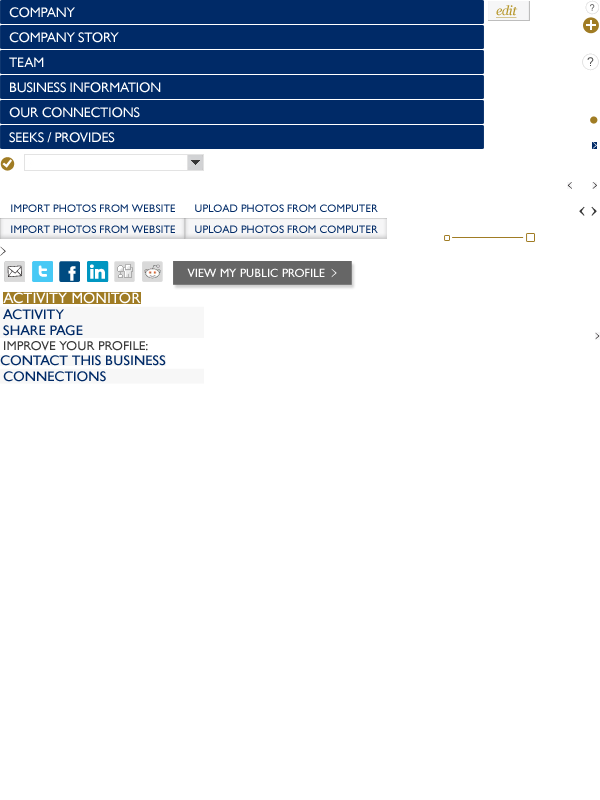
<style>
.page{position:relative;width:600px;height:800px;background:#ffffff}
.page>*{position:absolute;margin:0}
.t1{font:13px "Georgia-Italic";letter-spacing:-0.025em;color:#b59527;text-decoration:underline}
.t2{font:14px "GillSans";letter-spacing:-0.025em;color:#ffffff;text-transform:uppercase}
.t3{font:22.1px "Georgia";letter-spacing:-0.01em;color:#363636}
.t4{font:14px "GillSans";color:#002a67;text-transform:uppercase}
.t5{font:13px "GillSans";color:#3b3b3b;text-transform:uppercase}
</style>
<div class="page">
<p class="t1" style="left:496px;top:5px;width:22px;height:13px">edit</p>
<p class="t2" style="left:9px;top:7px;width:66px;height:11px">COMPANY</p>
<p class="t2" style="left:9px;top:32px;width:110px;height:11px">COMPANY story</p>
<p class="t2" style="left:9px;top:57px;width:35px;height:10px">TEAM</p>
<p class="t2" style="left:10px;top:82px;width:151px;height:11px">BUSINESS INFORMATION</p>
<p class="t2" style="left:9px;top:107px;width:131px;height:11px">OUR CONNECTIONS</p>
<p class="t2" style="left:9px;top:132px;width:106px;height:11px">SEEKS / PROVIDES</p>
<p class="t3" style="left:579px;top:206px;width:6px;height:10px;rotate:180deg">›</p>
<p class="t3" style="left:591px;top:206px;width:6px;height:10px">›</p>
<p class="t4" style="left:3px;top:309px;width:61px;height:11px">ACTIVITY</p>
<p class="t4" style="left:3px;top:325px;width:80px;height:11px">SHARE page</p>
<p class="t5" style="left:4px;top:341px;width:144px;height:10px">improve your profile:</p>
<p class="t4" style="left:3px;top:371px;width:103px;height:11px">CONNECTIONS</p>
</div>
